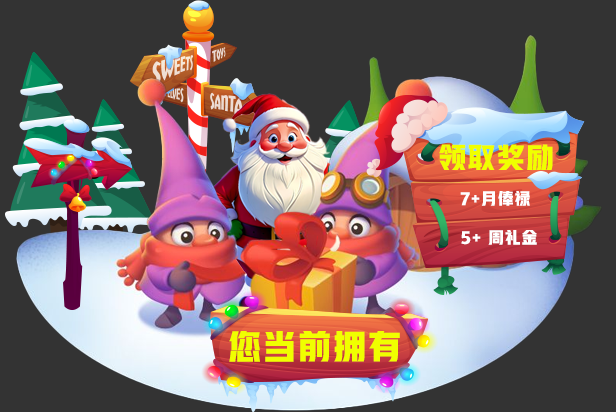
<style>
.page{position:relative;width:616px;height:412px;background:#333333}
.page>*{position:absolute;margin:0}
.t1{font:27.9px "HYYaKuHeiW";letter-spacing:0.05em;color:#f0ff00}
.t2{font:16px "HYYaKuHeiW";letter-spacing:0.05em;color:#ffffff}
.t3{font:33.3px "HYYaKuHeiW";letter-spacing:0.05em;color:#f0ff00}
</style>
<div class="page">
<p class="t1" style="left:439px;top:144px;width:114px;height:26px">领取奖励</p>
<p class="t2" style="left:460px;top:191px;width:70px;height:15px">7+月俸禄</p>
<p class="t2" style="left:461px;top:230px;width:76px;height:15px">5+ 周礼金</p>
<p class="t3" style="left:229px;top:331px;width:171px;height:31px">您当前拥有</p>
</div>
